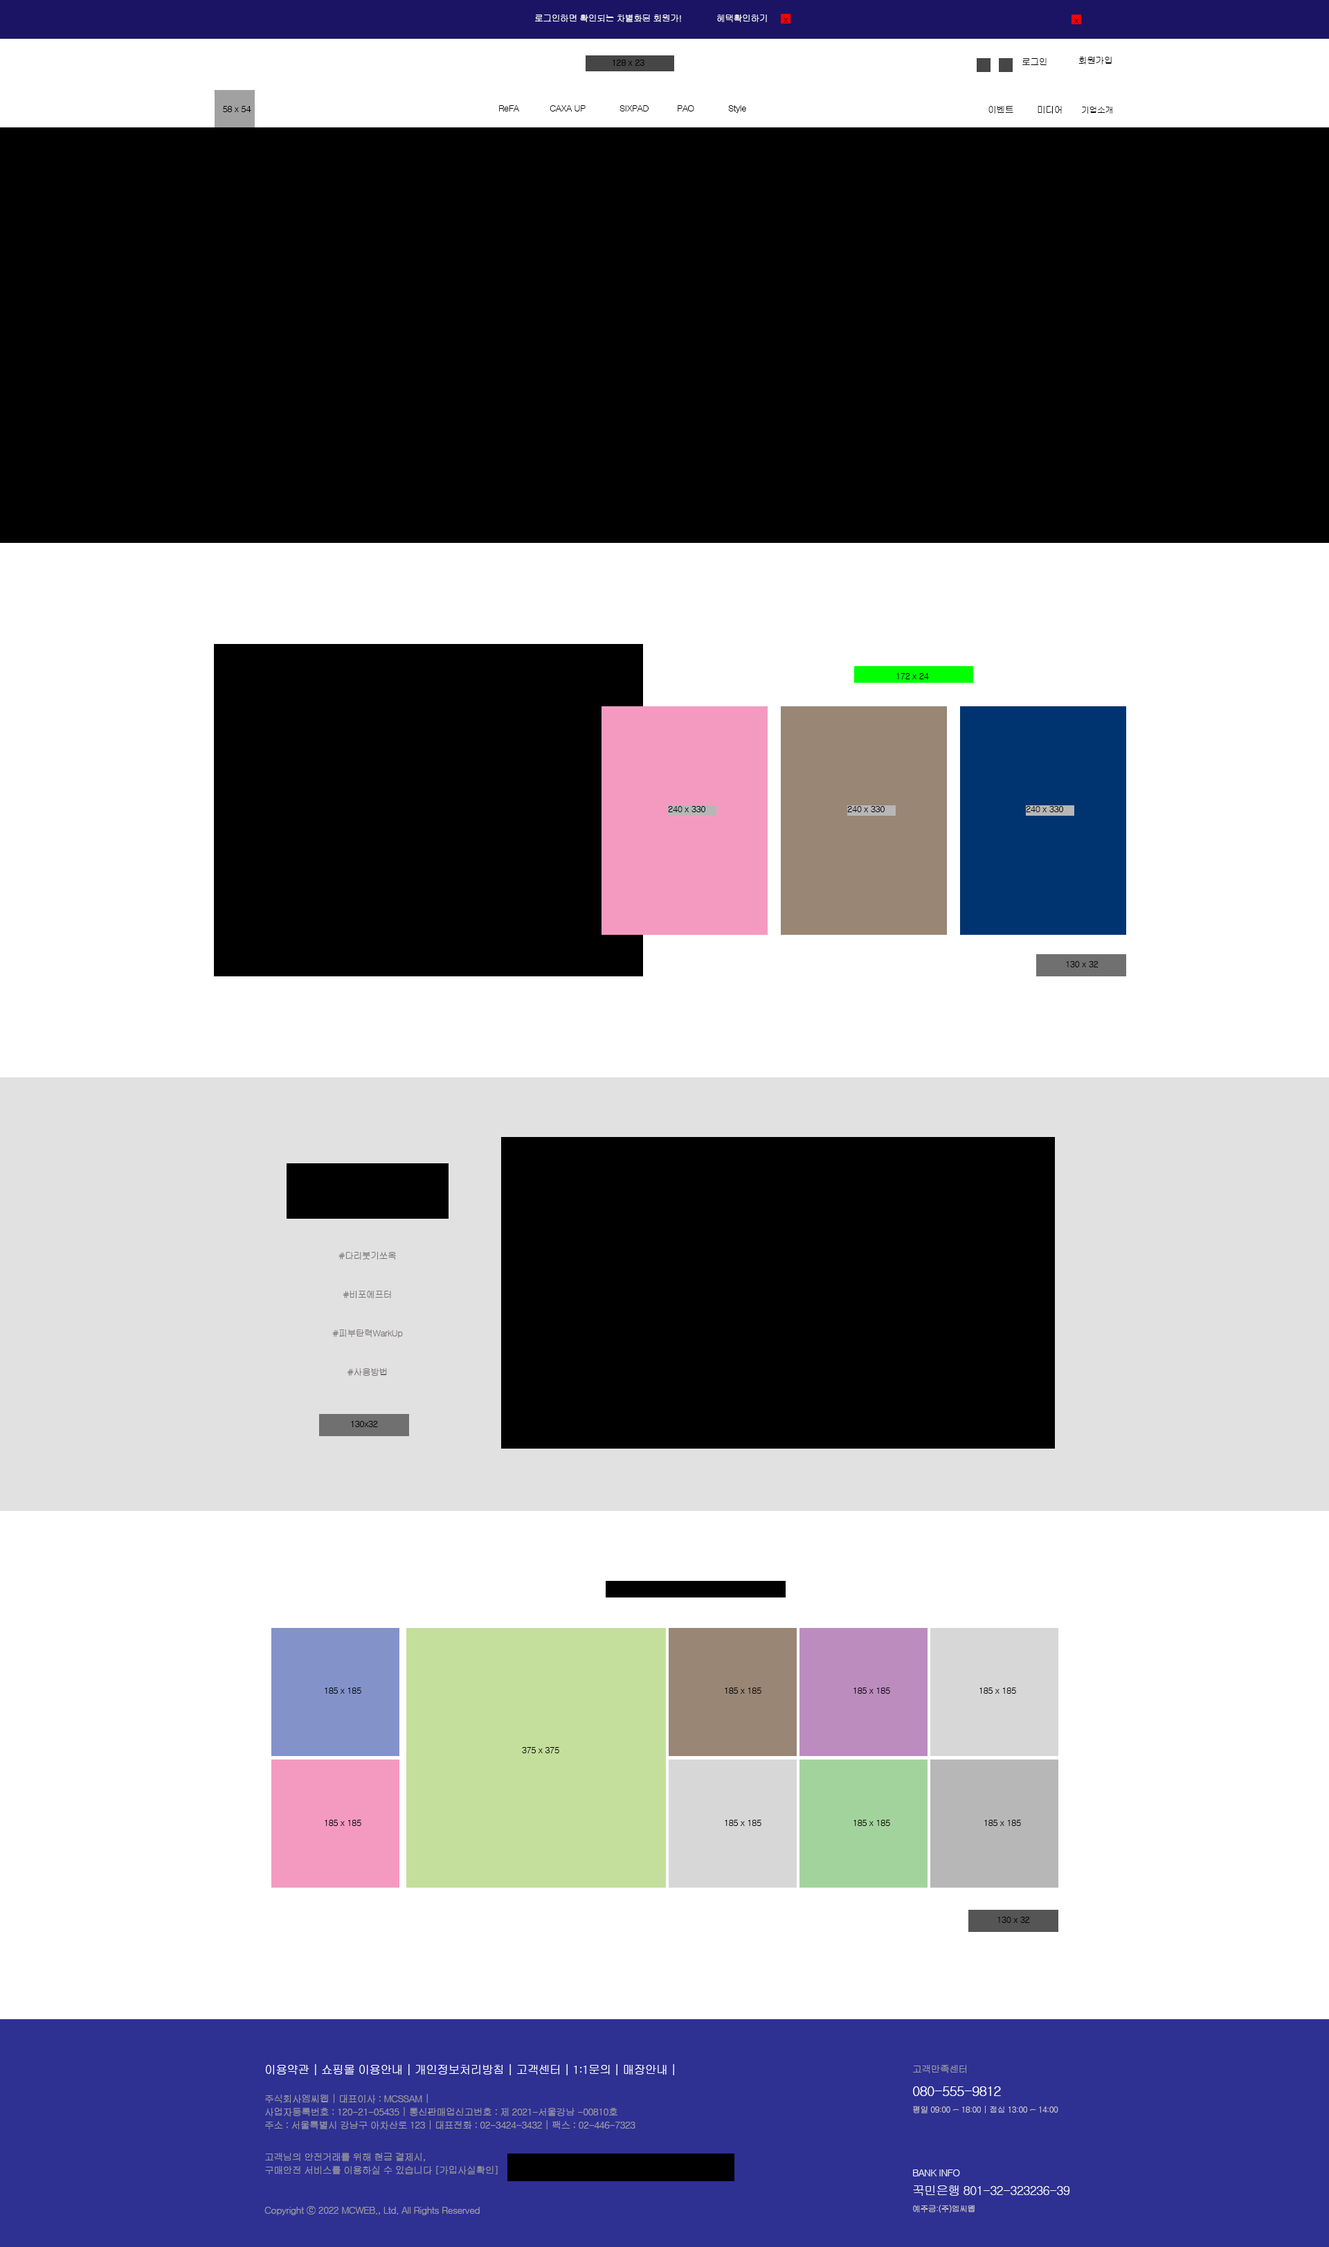
<style>
.page{position:relative;width:1329px;height:2247px;background:#ffffff}
.page>*{position:absolute;margin:0}
.t1{font:9px "Gulim";letter-spacing:-0.05em;color:#ffffff}
.t2{font:9px "Gulim";letter-spacing:-0.05em}
.t3{font:9px "Gulim";letter-spacing:-0.05em;color:#000000}
.t4{font:8.4px "Gulim";letter-spacing:-0.05em;color:#000000}
.t5{font:9px "Gulim";letter-spacing:-0.05em;color:#767171}
.t6{font:11.8px "Gulim";letter-spacing:-0.05em;color:#ffffff}
.t7{font:9.7px "Gulim";letter-spacing:-0.05em;color:#a29f9f}
.t8{font:13.8px "Gulim";letter-spacing:-0.05em;color:#ffffff}
.t9{font:8.3px "Gulim";letter-spacing:-0.05em;color:#cec8c8}
.t10{font:9.7px "Gulim";letter-spacing:-0.05em;color:#f8f6f6}
.t11{font:12.5px "Gulim";letter-spacing:-0.05em;color:#f8f6f6}
</style>
<div class="page">
<p class="t1" style="left:535px;top:14px;width:146px;height:8px">로그인하면 확인되는 차별화된 회원가!</p>
<p class="t1" style="left:717px;top:14px;width:50px;height:8px">혜택확인하기</p>
<p class="t2" style="left:784px;top:18px;width:4px;height:5px">x</p>
<p class="t2" style="left:1074px;top:19px;width:5px;height:5px">x</p>
<p class="t3" style="left:613px;top:60px;width:32px;height:6px">128 x 23</p>
<p class="t3" style="left:1023px;top:58px;width:24px;height:7px">로그인</p>
<p class="t3" style="left:1079px;top:57px;width:33px;height:7px">회원가입</p>
<p class="t3" style="left:223px;top:106px;width:28px;height:6px">58 x 54</p>
<p class="t3" style="left:499px;top:105px;width:20px;height:6px">ReFA</p>
<p class="t3" style="left:550px;top:105px;width:36px;height:6px">CAXA UP</p>
<p class="t3" style="left:620px;top:105px;width:29px;height:6px">SIXPAD</p>
<p class="t3" style="left:678px;top:105px;width:16px;height:6px">PAO</p>
<p class="t3" style="left:728px;top:105px;width:18px;height:8px">Style</p>
<p class="t3" style="left:989px;top:106px;width:25px;height:8px">이벤트</p>
<p class="t3" style="left:1038px;top:106px;width:24px;height:8px">미디어</p>
<p class="t4" style="left:1082px;top:107px;width:31px;height:7px">기업소개</p>
<p class="t3" style="left:897px;top:673px;width:32px;height:6px">172 x 24</p>
<p class="t3" style="left:668px;top:806px;width:37px;height:6px">240 x 330</p>
<p class="t3" style="left:847px;top:806px;width:38px;height:6px">240 x 330</p>
<p class="t3" style="left:1026px;top:806px;width:37px;height:6px">240 x 330</p>
<p class="t3" style="left:1066px;top:961px;width:33px;height:6px">130 x 32</p>
<p class="t5" style="left:339px;top:1251px;width:57px;height:8px">#다리붓기쏘옥</p>
<p class="t5" style="left:343px;top:1290px;width:48px;height:8px">#비포에프터</p>
<p class="t5" style="left:332px;top:1329px;width:71px;height:9px">#피부탄력WarkUp</p>
<p class="t5" style="left:348px;top:1368px;width:39px;height:8px">#사용방법</p>
<p class="t3" style="left:351px;top:1421px;width:27px;height:6px">130x32</p>
<p class="t3" style="left:325px;top:1687px;width:36px;height:6px">185 x 185</p>
<p class="t3" style="left:725px;top:1687px;width:37px;height:6px">185 x 185</p>
<p class="t3" style="left:854px;top:1687px;width:36px;height:6px">185 x 185</p>
<p class="t3" style="left:980px;top:1687px;width:36px;height:6px">185 x 185</p>
<p class="t3" style="left:522px;top:1747px;width:37px;height:6px">375 x 375</p>
<p class="t3" style="left:325px;top:1819px;width:36px;height:7px">185 x 185</p>
<p class="t3" style="left:725px;top:1819px;width:37px;height:7px">185 x 185</p>
<p class="t3" style="left:854px;top:1819px;width:36px;height:7px">185 x 185</p>
<p class="t3" style="left:984px;top:1819px;width:37px;height:7px">185 x 185</p>
<p class="t3" style="left:998px;top:1916px;width:32px;height:7px">130 x 32</p>
<p class="t6" style="left:266px;top:2064px;width:408px;height:11px">이용약관 | 쇼핑몰 이용안내 | 개인정보처리방침 | 고객센터 | 1:1문의 | 매장안내 |</p>
<p class="t7" style="left:913px;top:2064px;width:53px;height:9px">고객만족센터</p>
<p class="t7" style="left:265px;top:2094px;width:163px;height:9px">주식회사엠씨웹 | 대표이사 : MCSSAM |</p>
<p class="t8" style="left:913px;top:2086px;width:88px;height:10px">080-555-9812</p>
<p class="t9" style="left:913px;top:2105px;width:146px;height:8px">평일 09:00 ~ 18:00 | 점심 13:00 ~ 14:00</p>
<p class="t7" style="left:265px;top:2107px;width:353px;height:9px">사업자등록번호 : 120-21-05435 | 통신판매업신고번호 : 제 2021-서울강남 -00810호</p>
<p class="t7" style="left:265px;top:2120px;width:371px;height:10px">주소 : 서울특별시 강남구 아차산로 123 | 대표전화 : 02-3424-3432 | 팩스 : 02-446-7323</p>
<p class="t7" style="left:265px;top:2152px;width:160px;height:9px">고객님의 안전거래를 위해 현금 결제시,</p>
<p class="t7" style="left:265px;top:2166px;width:233px;height:9px">구매안전 서비스를 이용하실 수 있습니다 [가입사실확인]</p>
<p class="t10" style="left:913px;top:2169px;width:47px;height:7px">BANK INFO</p>
<p class="t11" style="left:913px;top:2185px;width:157px;height:10px">꾹민은행 801-32-323236-39</p>
<p class="t7" style="left:264px;top:2206px;width:216px;height:9px">Copyright ⓒ 2022 MCWEB., Ltd. All Rights Reserved</p>
<p class="t9" style="left:913px;top:2204px;width:62px;height:9px">예주금:(주)엠씨웹</p>
</div>
